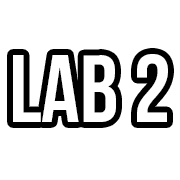
<style>
.page{position:relative;width:180px;height:180px;background:#ffffff}
.page>*{position:absolute;margin:0}
.t1{font:95px "BebasNeueBold";color:#ffffff}
</style>
<div class="page">
<p class="t1" style="left:13px;top:54px;width:155px;height:68px">lab 2</p>
</div>
